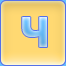
<style>
.page{position:relative;width:66px;height:66px}
.page>*{position:absolute;margin:0}
.t1{font:41px "Tahoma-Bold"}
</style>
<div class="page">
<p class="t1" style="left:22px;top:17px;width:25px;height:30px">Ч</p>
<p class="t1" style="left:22px;top:17px;width:25px;height:30px">Ч</p>
</div>
